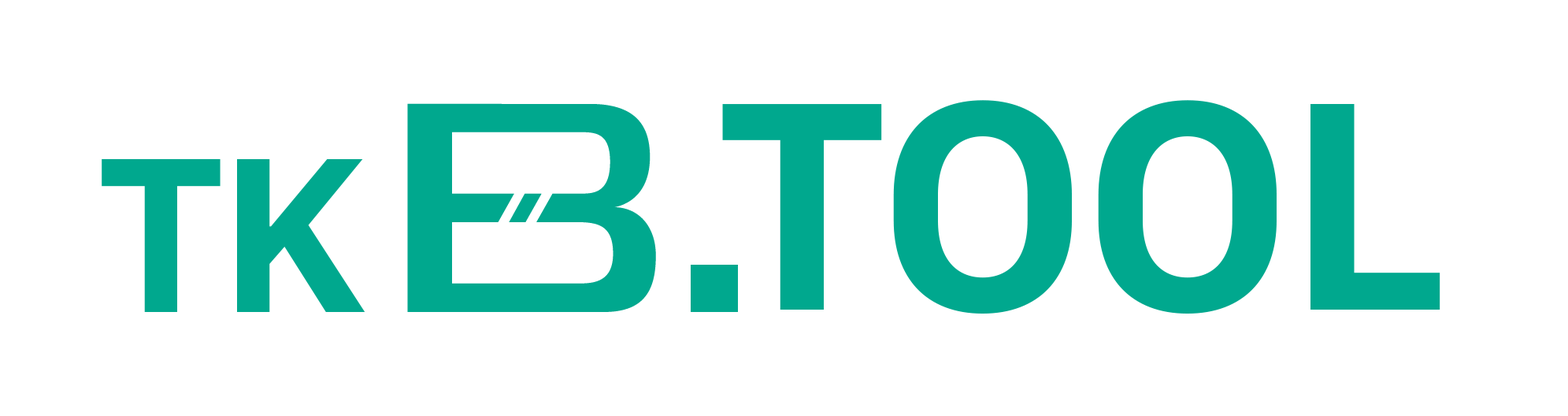
<style>
.page{position:relative;width:1568px;height:416px;background:#ffffff}
.page>*{position:absolute;margin:0}
.t1{font:308.1px "SanFranciscoDisplay-Bold";color:#00a88e}
.t2{font:229.7px "SanFranciscoDisplay-Bold";color:#00a88e}
</style>
<div class="page">
<p class="t1" style="left:722px;top:100px;width:718px;height:213px">TOOL</p>
<p class="t2" style="left:102px;top:158px;width:263px;height:154px">TK</p>
</div>
